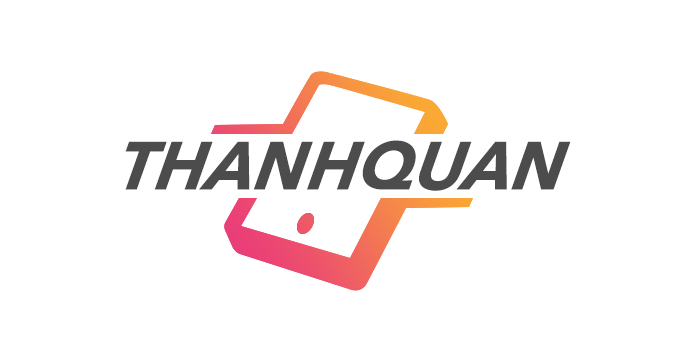
<style>
.page{position:relative;width:693px;height:363px;background:#ffffff}
.page>*{position:absolute;margin:0}
.t1{font:67.4px "AvenirNext-BoldItalic";color:#4c4c4c;font-style:italic}
</style>
<div class="page">
<p class="t1" style="left:125px;top:140px;width:446px;height:51px">THANHQUAN</p>
</div>
